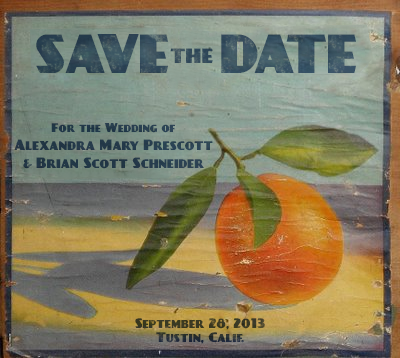
<style>
.page{position:relative;width:400px;height:358px}
.page>*{position:absolute;margin:0}
.t1{font:48px "DayPosterBlack";color:#3a5260}
.t2{font:18px "DayPosterBlack";color:#3a5260}
.t3{font:13px/18px "DayPosterBlack";color:#212d4f}
.t4{font:11px/18px "DayPosterBlack";color:#212d4f}
.t5{font:11px/14px "DayPosterBlack";color:#212d4f}
.t6{font:12px/18px "DayPosterBlack"}
.t7{font:12px/14px "DayPosterBlack"}
</style>
<div class="page">
<p class="t1" style="left:36px;top:34px;width:320px;height:39px">SAVE<span class="t2">THE </span>DATE</p>
<p class="t3" style="left:14px;top:123px;width:199px;height:46px;text-align:center"><span class="t4">For the Wedding of<br></span>Alexandra Mary Prescott<br><span class="t5">&amp; </span>Brian Scott Schneider</p>
<p class="t6" style="left:135px;top:318px;width:130px;height:26px;text-align:center">September 28, 2013 <br><span class="t7">Tustin, Calif.</span></p>
</div>
